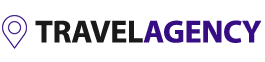
<style>
.page{position:relative;width:265px;height:62px;background:#ffffff}
.page>*{position:absolute;margin:0}
.t1{font:32px "MyriadPro-Bold";letter-spacing:-0.01em;color:#1a1a1a}
.t2{font:32px "MyriadPro-Bold";letter-spacing:-0.01em;color:#360d82}
</style>
<div class="page">
<p class="t1" style="left:35px;top:20px;width:227px;height:23px">TRAVEL<span class="t2">AGENCY</span></p>
</div>
